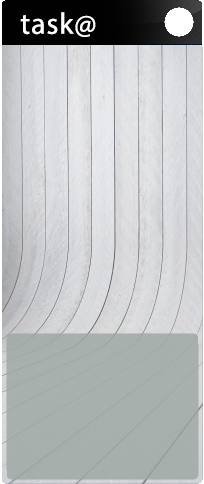
<style>
.page{position:relative;width:204px;height:484px}
.page>*{position:absolute;margin:0}
.t1{font:30px "MyriadPro-Regular";letter-spacing:0.03em;color:#ffffff}
</style>
<div class="page">
<p class="t1" style="left:20px;top:12px;width:76px;height:25px">task@</p>
</div>
